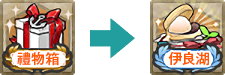
<style>
.page{position:relative;width:225px;height:75px;background:#ffffff}
.page>*{position:absolute;margin:0}
.t1{font:14px "GothicMB101Pr6N-Medium";color:#ff5a00}
</style>
<div class="page">
<p class="t1" style="left:17px;top:51px;width:43px;height:15px">禮物箱</p>
<p class="t1" style="left:168px;top:51px;width:41px;height:15px">伊良湖</p>
</div>
